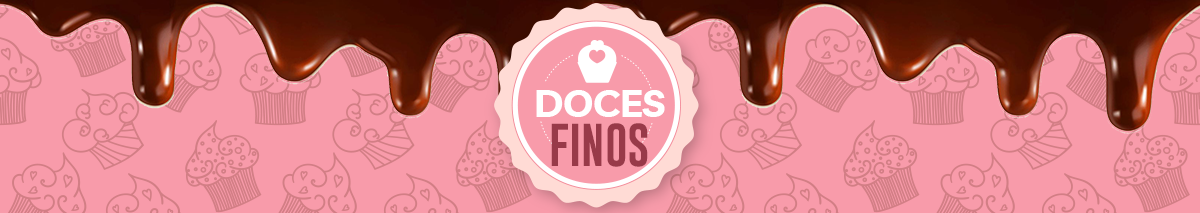
<style>
.page{position:relative;width:1200px;height:213px;background:#f89baa}
.page>*{position:absolute;margin:0}
.t1{font:38.3px "Livvic-Bold";color:#ffffff;text-transform:uppercase}
.t2{font:44.1px "GoboldUplow";color:#983a49;text-transform:uppercase}
</style>
<div class="page">
<p class="t1" style="left:536px;top:90px;width:129px;height:27px">doces</p>
<p class="t2" style="left:551px;top:123px;width:97px;height:44px">finos</p>
</div>
